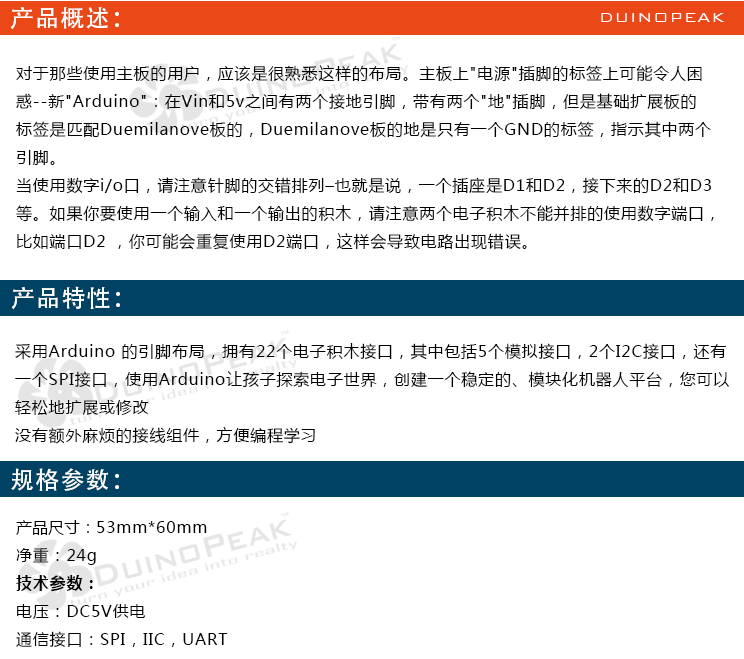
<style>
.page{position:relative;width:744px;height:659px;background:#ffffff}
.page>*{position:absolute;margin:0}
.t1{font:24px "AdobeHeitiStd-Regular";letter-spacing:0.05em;color:#ffffff}
.t2{font:18px "BankGothicBT-Light";letter-spacing:0.05em;color:#ffffff}
.t3{font:16px "MicrosoftYaHei";letter-spacing:0.05em;color:#000000}
.t4{font:16px "MicrosoftYaHei";color:#000000}
.t5{font:16px "MicrosoftYaHei-Bold";letter-spacing:0.05em;color:#000000}
</style>
<div class="page">
<p class="t1" style="left:10px;top:7px;width:109px;height:23px">产品概述：</p>
<p class="t2" style="left:601px;top:13px;width:124px;height:9px">DUINOPEAK</p>
<p class="t3" style="left:16px;top:65px;width:698px;height:185px">对于那些使用主板的用户，应该是很熟悉这样的布局。主板上"电源"插脚的标签上可能令人困<br>惑--新"Arduino"：在Vin和5v之间有两个接地引脚，带有两个"地"插脚，但是基础扩展板的<br>标签是匹配Duemilanove板的，Duemilanove板的地是只有一个GND的标签，指示其中两个<br>引脚。<br>当使用数字i/o口，请注意针脚的交错排列–也就是说，一个插座是D1和D2，接下来的D2和D3<br>等。如果你要使用一个输入和一个输出的积木，请注意两个电子积木不能并排的使用数字端口，<br>比如端口D2 ，你可能会重复使用D2端口，这样会导致电路出现错误。</p>
<p class="t1" style="left:11px;top:286px;width:109px;height:24px">产品特性：</p>
<p class="t3" style="left:15px;top:343px;width:714px;height:101px">采用Arduino 的引脚布局，拥有22个电子积木接口，其中包括5个模拟接口，2个I2C接口，还有<br>一个SPI接口，使用Arduino让孩子探索电子世界，创建一个稳定的、模块化机器人平台，您可以<br>轻松地扩展或修改<br>没有额外麻烦的接线组件，方便编程学习</p>
<p class="t1" style="left:11px;top:468px;width:108px;height:23px">规格参数：</p>
<p class="t3" style="left:16px;top:520px;width:212px;height:127px"><span class="t4">产品尺寸：</span>53mm*60mm<br>净重：24g<br><span class="t5">技术参数：<br></span>电压：DC5V供电<br>通信接口：SPI，IIC，UART</p>
</div>
